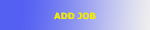
<style>
.page{position:relative;width:150px;height:30px}
.page>*{position:absolute;margin:0}
.t1{font:8.6px "Verdana-Bold";color:#f1e90c}
</style>
<div class="page">
<p class="t1" style="left:54px;top:12px;width:42px;height:8px">ADD JOB</p>
</div>
